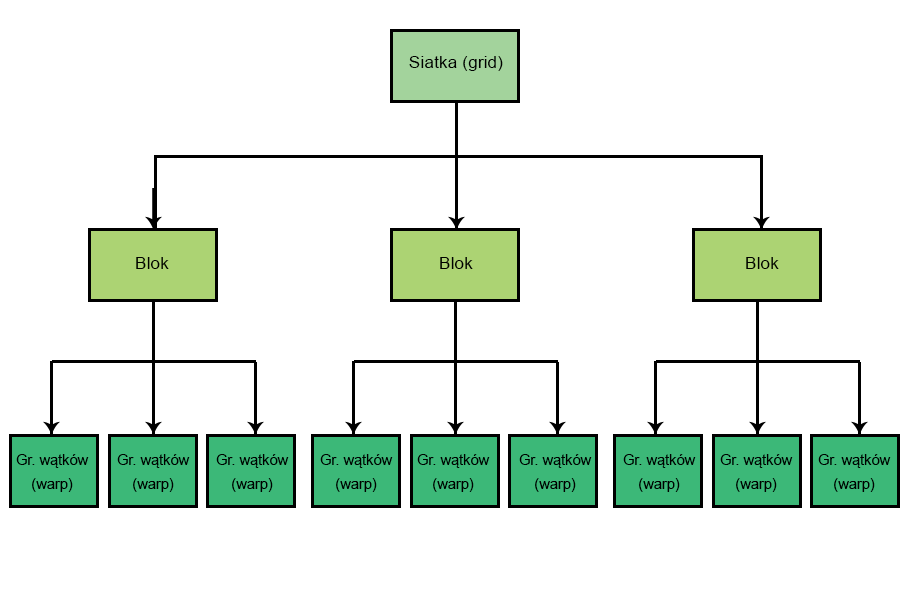
<style>
.page{position:relative;width:900px;height:600px;background:#ffffff}
.page>*{position:absolute;margin:0}
.t1{font:30px "ArialMT";color:#000000}
.t2{font:25px "ArialMT";color:#000000}
</style>
<div class="page">
<p class="t1" style="left:409px;top:56px;width:94px;height:15px">Siatka (grid)</p>
<p class="t1" style="left:136px;top:257px;width:33px;height:12px">Blok</p>
<p class="t1" style="left:440px;top:257px;width:33px;height:12px">Blok</p>
<p class="t1" style="left:746px;top:257px;width:33px;height:12px">Blok</p>
<p class="t2" style="left:16px;top:454px;width:73px;height:38px">Gr. wątków (warp)</p>
<p class="t2" style="left:117px;top:454px;width:73px;height:38px">Gr. wątków (warp)</p>
<p class="t2" style="left:216px;top:454px;width:73px;height:38px">Gr. wątków (warp)</p>
<p class="t2" style="left:320px;top:454px;width:73px;height:38px">Gr. wątków (warp)</p>
<p class="t2" style="left:417px;top:454px;width:73px;height:38px">Gr. wątków (warp)</p>
<p class="t2" style="left:519px;top:454px;width:73px;height:38px">Gr. wątków (warp)</p>
<p class="t2" style="left:623px;top:454px;width:73px;height:38px">Gr. wątków (warp)</p>
<p class="t2" style="left:720px;top:454px;width:73px;height:38px">Gr. wątków (warp)</p>
<p class="t2" style="left:818px;top:454px;width:73px;height:38px">Gr. wątków (warp)</p>
</div>
